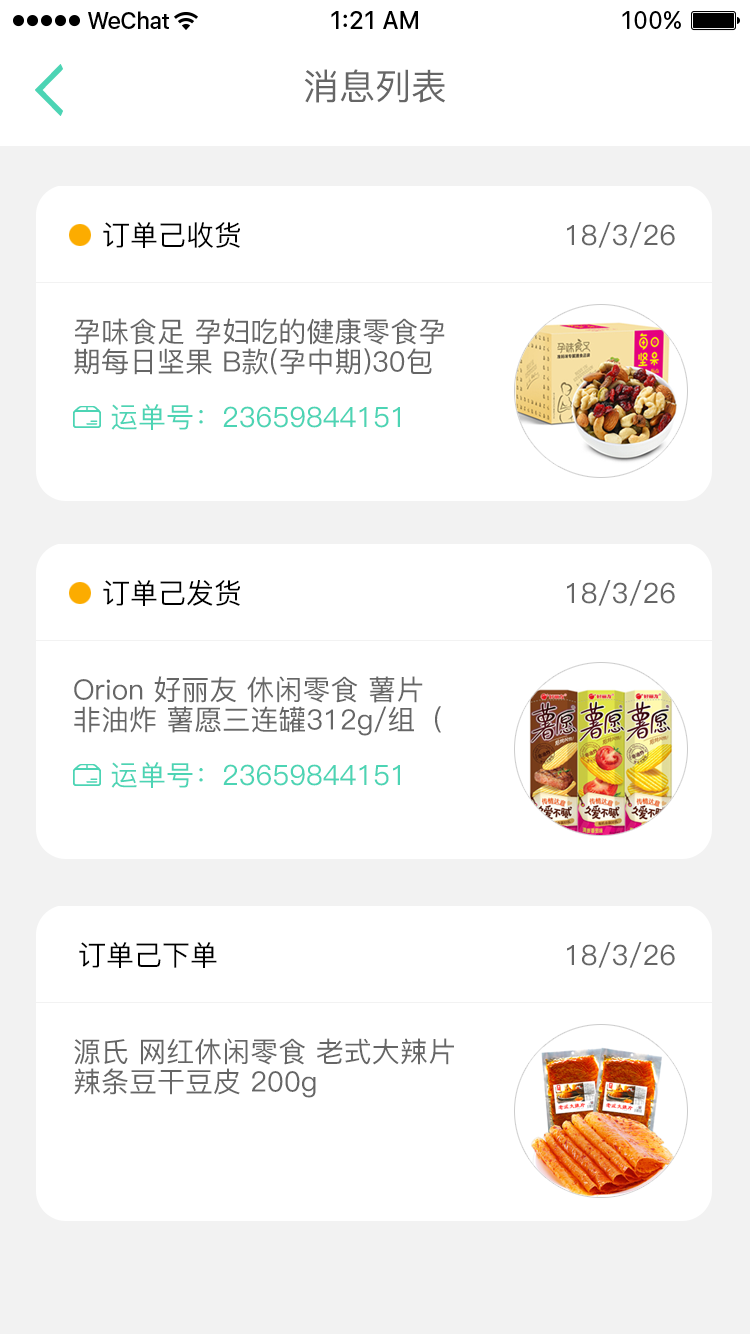
<style>
.page{position:relative;width:750px;height:1334px;background:#ffffff}
.page>*{position:absolute;margin:0}
.t1{font:36px "PingFang-SC-Medium";color:#666666}
.t2{font:28px "PingFang-SC-Medium";color:#000000}
.t3{font:28px "PingFang-SC-Medium";color:#666666}
.t4{font:28px/30px "PingFang-SC-Medium";color:#666666}
.t5{font:28px "PingFang-SC-Medium";color:#4cd4b4}
</style>
<div class="page">
<p class="t1" style="left:304px;top:69px;width:141px;height:34px">消息列表</p>
<p class="t2" style="left:103px;top:222px;width:137px;height:26px">订单己收货</p>
<p class="t3" style="left:567px;top:222px;width:108px;height:26px">18/3/26</p>
<p class="t4" style="left:74px;top:318px;width:371px;height:57px">孕味食足 孕妇吃的健康零食孕期每日坚果 B款(孕中期)30包</p>
<p class="t5" style="left:111px;top:404px;width:289px;height:26px">运单号：23659844151</p>
<p class="t2" style="left:103px;top:580px;width:137px;height:26px">订单己发货</p>
<p class="t3" style="left:567px;top:580px;width:108px;height:26px">18/3/26</p>
<p class="t4" style="left:74px;top:676px;width:367px;height:60px">Orion 好丽友 休闲零食 薯片 非油炸 薯愿三连罐312g/组（</p>
<p class="t5" style="left:111px;top:762px;width:289px;height:26px">运单号：23659844151</p>
<p class="t2" style="left:79px;top:942px;width:138px;height:26px">订单己下单</p>
<p class="t3" style="left:567px;top:942px;width:108px;height:26px">18/3/26</p>
<p class="t4" style="left:74px;top:1038px;width:380px;height:60px">源氏 网红休闲零食 老式大辣片 辣条豆干豆皮 200g</p>
</div>
